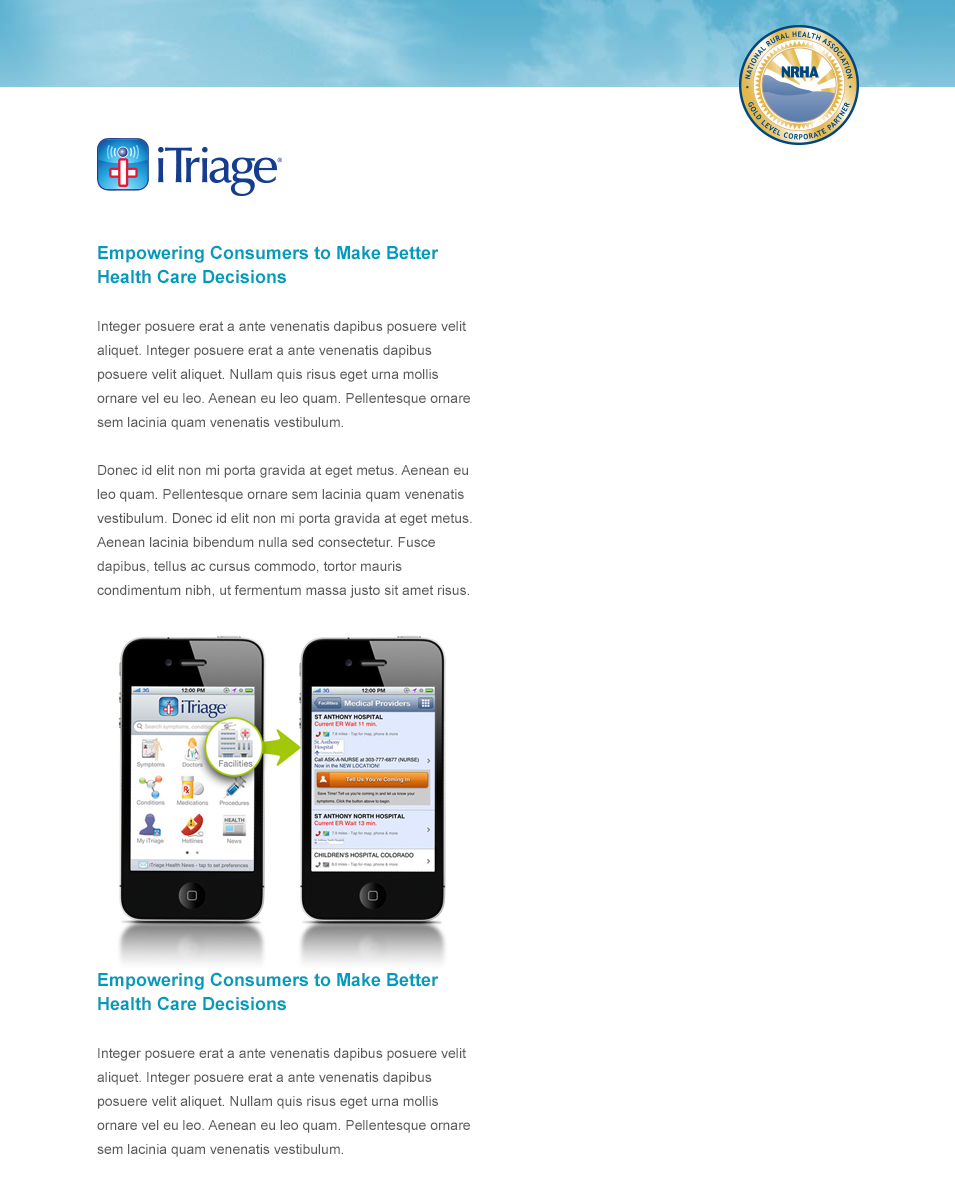
<style>
.page{position:relative;width:955px;height:1200px;background:#ffffff}
.page>*{position:absolute;margin:0}
.t1{font:14px/24px "ArialMT";color:#58595b}
.t2{font:18px/24px "Arial-BoldMT";color:#009cbb}
</style>
<div class="page">
<p class="t1" style="left:97px;top:245px;width:375px;height:353px"><span class="t2">Empowering Consumers to Make Better Health Care Decisions<br></span><br>Integer posuere erat a ante venenatis dapibus posuere velit aliquet. Integer posuere erat a ante venenatis dapibus posuere velit aliquet. Nullam quis risus eget urna mollis ornare vel eu leo. Aenean eu leo quam. Pellentesque ornare sem lacinia quam venenatis vestibulum.<br><br>Donec id elit non mi porta gravida at eget metus. Aenean eu leo quam. Pellentesque ornare sem lacinia quam venenatis vestibulum. Donec id elit non mi porta gravida at eget metus. Aenean lacinia bibendum nulla sed consectetur. Fusce dapibus, tellus ac cursus commodo, tortor mauris condimentum nibh, ut fermentum massa justo sit amet risus.</p>
<p class="t1" style="left:97px;top:972px;width:373px;height:185px"><span class="t2">Empowering Consumers to Make Better Health Care Decisions<br></span><br>Integer posuere erat a ante venenatis dapibus posuere velit aliquet. Integer posuere erat a ante venenatis dapibus posuere velit aliquet. Nullam quis risus eget urna mollis ornare vel eu leo. Aenean eu leo quam. Pellentesque ornare sem lacinia quam venenatis vestibulum.</p>
</div>
